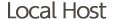
<style>
.page{position:relative;width:114px;height:19px;background:#ffffff}
.page>*{position:absolute;margin:0}
.t1{font:20px "UDShinGoPro-Light";letter-spacing:-0.04em;color:#4c4843;font-weight:bold}
</style>
<div class="page">
<p class="t1" style="left:8px;top:1px;width:99px;height:18px">Local Host</p>
</div>
